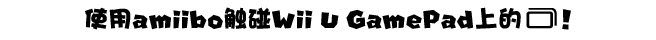
<style>
.page{position:relative;width:656px;height:40px;background:#ffffff}
.page>*{position:absolute;margin:0}
.t1{font:24px "MARIOFontv3_1-Solid";color:#000000}
.t2{font:24px "DFPHaiBaoW12";color:#000000}
</style>
<div class="page">
<p class="t1" style="left:85px;top:7px;width:486px;height:23px"><span class="t2">使用</span>amiibo<span class="t2">触碰</span>Wii U GamePad<span class="t2">上的     </span>！</p>
</div>
